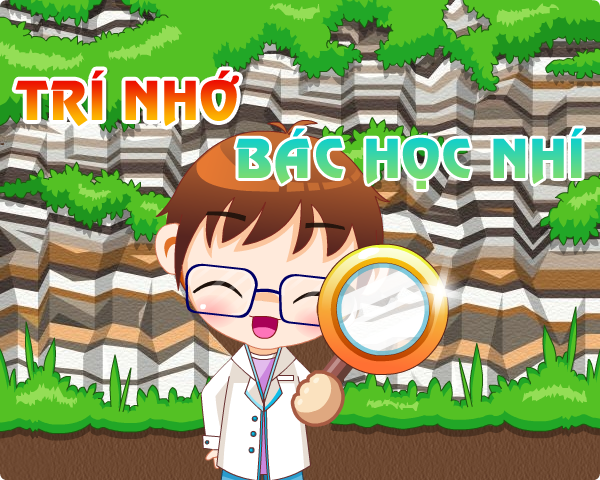
<style>
.page{position:relative;width:600px;height:480px}
.page>*{position:absolute;margin:0}
.t1{font:48px "VNI-Revue-Bold"}
</style>
<div class="page">
<p class="t1" style="left:15px;top:70px;width:224px;height:56px">TRÍ NHÔÙ</p>
<p class="t1" style="left:236px;top:128px;width:348px;height:61px">BAÙC HOÏC NHÍ</p>
</div>
